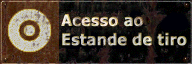
<style>
.page{position:relative;width:192px;height:64px}
.page>*{position:absolute;margin:0}
.t1{font:16px "Verdana-Bold";font-weight:bold;scale:0.88 1}
</style>
<div class="page">
<p class="t1" style="left:61px;top:14px;width:126px;height:32px">Acesso ao<br>Estande de tiro</p>
</div>
